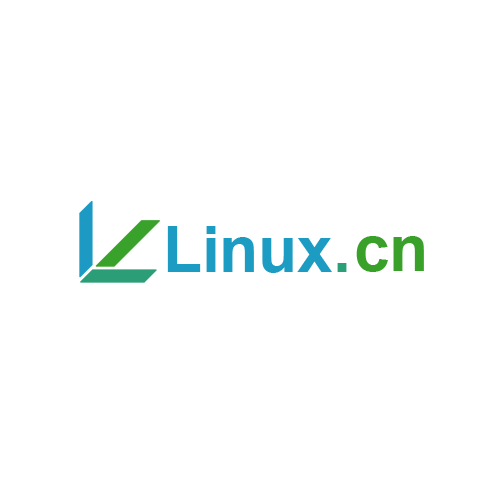
<style>
.page{position:relative;width:500px;height:500px;background:#ffffff}
.page>*{position:absolute;margin:0}
.t1{font:63.5px "Arial-BoldMT";color:#1c9bc4}
.t2{font:63.5px "Arial-BoldMT";color:#39a22a}
.t3{font:63.5px "Arial-BoldMT";color:#2b9f77}
</style>
<div class="page">
<p class="t1" style="left:167px;top:226px;width:165px;height:47px">Linux</p>
<p class="t2" style="left:356px;top:236px;width:68px;height:36px">cn</p>
<p class="t3" style="left:337px;top:263px;width:10px;height:9px">.</p>
</div>
